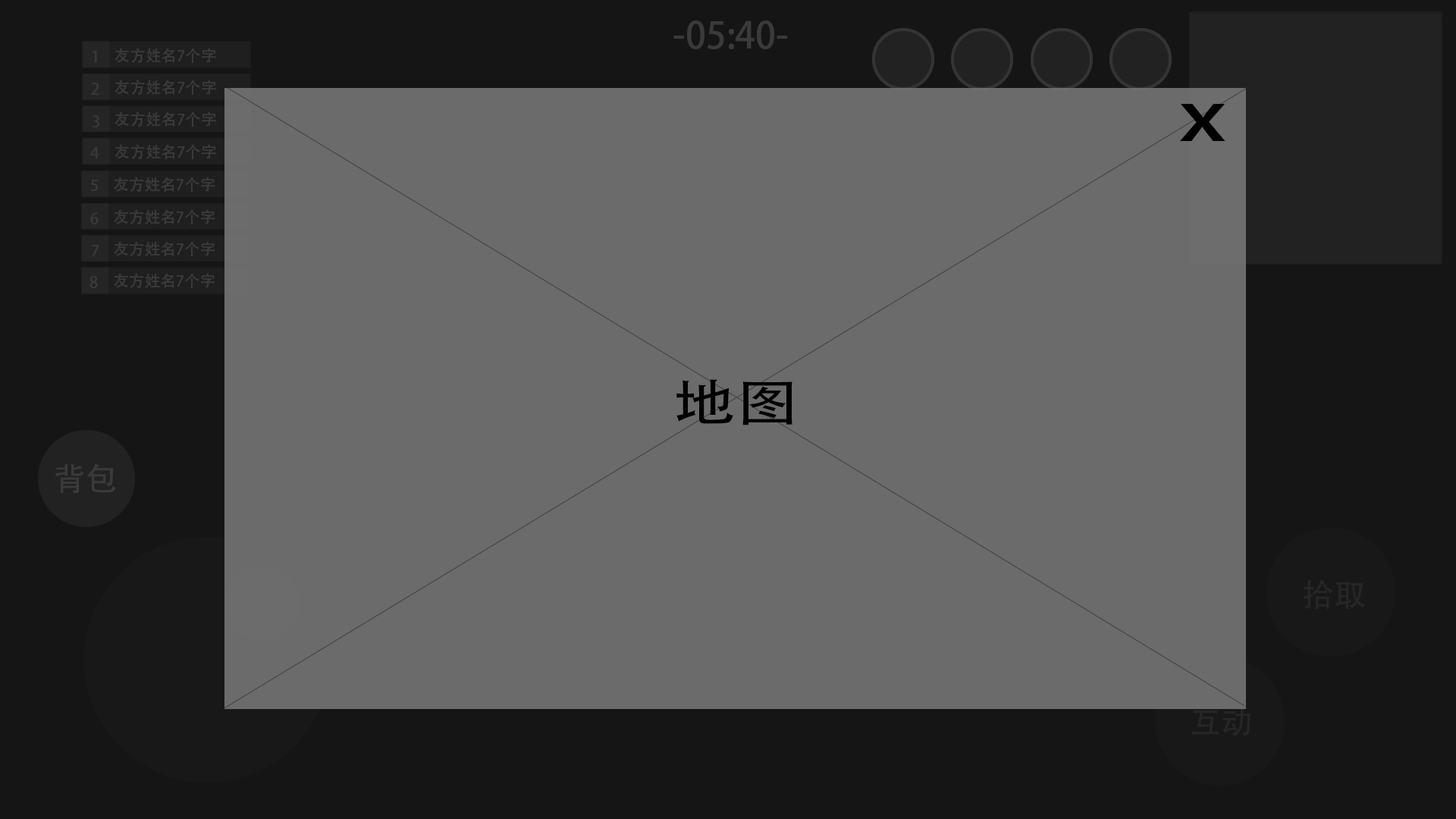
<style>
.page{position:relative;width:1456px;height:819px;background:#6b6b6b}
.page>*{position:absolute;margin:0}
.t1{font:36.4px "AdobeHeitiStd-Regular";color:#3a3a3a}
.t2{font:15.6px "AdobeHeitiStd-Regular";color:#3a3a3a}
.t3{font:67.3px "AdobeHeitiStd-Regular";color:#000000;scale:1.36 1}
.t4{font:50.5px "AdobeHeitiStd-Regular";color:#000000;scale:1.25 1}
.t5{font:31.8px "AdobeHeitiStd-Regular";color:#3a3a3a}
.t6{font:31.8px "AdobeHeitiStd-Regular";color:#262626}
</style>
<div class="page">
<p class="t1" style="left:673px;top:20px;width:114px;height:29px">-05:40-</p>
<p class="t2" style="left:92px;top:50px;width:5px;height:12px">1</p>
<p class="t2" style="left:115px;top:48px;width:101px;height:15px">友方姓名7个字</p>
<p class="t2" style="left:91px;top:83px;width:8px;height:12px">2</p>
<p class="t2" style="left:115px;top:80px;width:101px;height:15px">友方姓名7个字</p>
<p class="t2" style="left:115px;top:111px;width:101px;height:16px">友方姓名7个字</p>
<p class="t3" style="left:1180px;top:104px;width:45px;height:37px">x</p>
<p class="t2" style="left:92px;top:115px;width:7px;height:12px">3</p>
<p class="t2" style="left:90px;top:146px;width:9px;height:12px">4</p>
<p class="t2" style="left:115px;top:144px;width:101px;height:15px">友方姓名7个字</p>
<p class="t2" style="left:90px;top:180px;width:8px;height:11px">5</p>
<p class="t2" style="left:114px;top:177px;width:101px;height:15px">友方姓名7个字</p>
<p class="t2" style="left:114px;top:209px;width:101px;height:15px">友方姓名7个字</p>
<p class="t2" style="left:90px;top:212px;width:9px;height:12px">6</p>
<p class="t2" style="left:92px;top:245px;width:7px;height:11px">7</p>
<p class="t2" style="left:114px;top:241px;width:101px;height:15px">友方姓名7个字</p>
<p class="t2" style="left:89px;top:276px;width:9px;height:12px">8</p>
<p class="t2" style="left:114px;top:273px;width:101px;height:15px">友方姓名7个字</p>
<p class="t4" style="left:676px;top:379px;width:116px;height:46px">地图</p>
<p class="t5" style="left:55px;top:463px;width:61px;height:31px">背包</p>
<p class="t6" style="left:1303px;top:579px;width:63px;height:30px">拾取</p>
</div>
